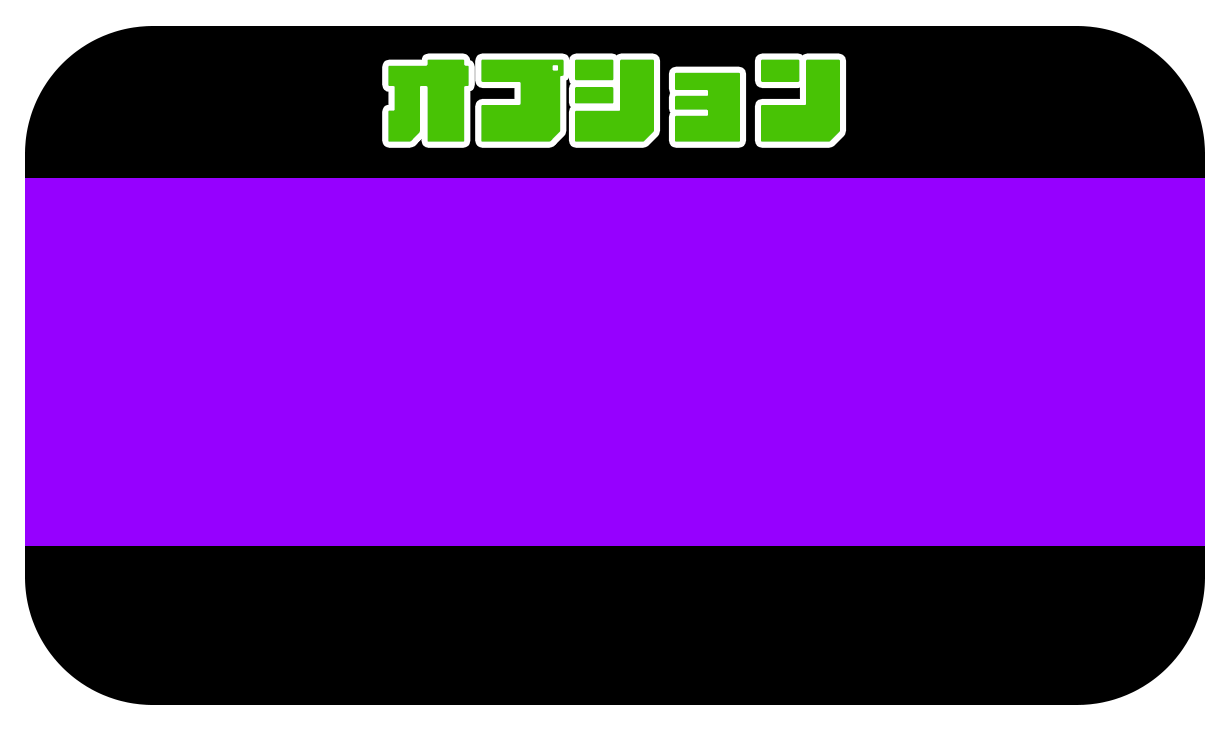
<style>
.page{position:relative;width:1230px;height:730px;background:#9600ff}
.page>*{position:absolute;margin:0}
.t1{font:93px "AB-countryroad";color:#48c305}
</style>
<div class="page">
<p class="t1" style="left:388px;top:59px;width:452px;height:83px">オプション</p>
</div>
